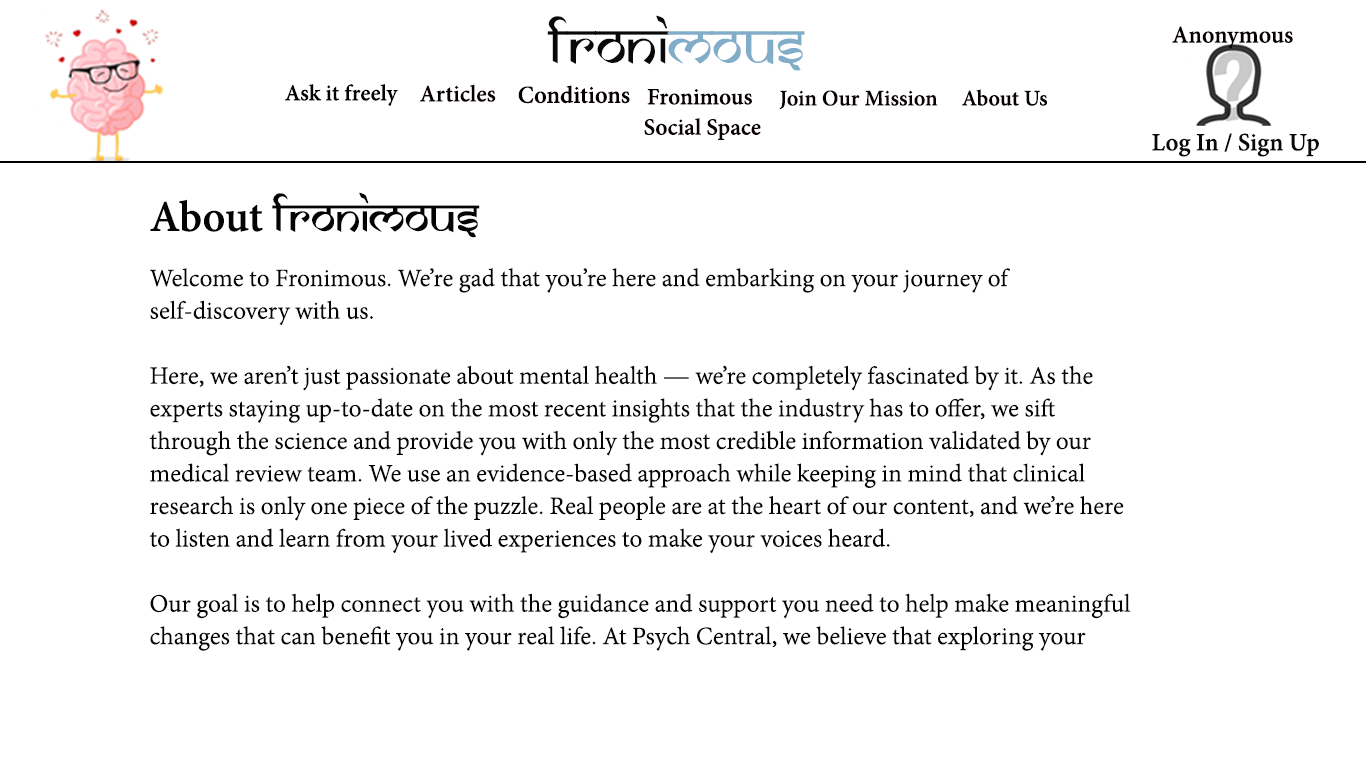
<style>
.page{position:relative;width:1366px;height:768px;background:#ffffff}
.page>*{position:absolute;margin:0}
.t1{font:59.7px "SamarkanNormal";color:#090909}
.t2{font:59.7px "SamarkanNormal";color:#82adc9}
.t3{font:26.2px "AdobeDevanagari-Bold";color:#080000}
.t4{font:24.8px "AdobeDevanagari-Bold";color:#020202}
.t5{font:25.8px "AdobeDevanagari-Bold";color:#080000}
.t6{font:26.5px "AdobeDevanagari-Bold";color:#080000}
.t7{font:25.3px "AdobeDevanagari-Bold";color:#080000}
.t8{font:24.2px "AdobeDevanagari-Bold";color:#080000}
.t9{font:24.3px "AdobeDevanagari-Bold";color:#080000}
.t10{font:27.2px "AdobeDevanagari-Bold";color:#090909}
.t11{font:48px "SamarkanNormal";color:#040404}
.t12{font:48px "AdobeDevanagari-Bold";color:#040404}
.t13{font:27.1px "AdobeDevanagari-Regular";color:#040404}
</style>
<div class="page">
<p class="t1" style="left:547px;top:15px;width:258px;height:56px">froni<span class="t2">mous</span></p>
<p class="t3" style="left:1172px;top:26px;width:121px;height:23px">Anonymous</p>
<p class="t4" style="left:285px;top:84px;width:113px;height:22px">Ask it freely</p>
<p class="t5" style="left:419px;top:84px;width:77px;height:18px">Articles</p>
<p class="t6" style="left:518px;top:85px;width:112px;height:19px">Conditions</p>
<p class="t7" style="left:644px;top:89px;width:117px;height:51px;text-align:center">Fronimous <br> Social Space</p>
<p class="t8" style="left:962px;top:89px;width:85px;height:17px">About Us</p>
<p class="t9" style="left:779px;top:90px;width:159px;height:20px">Join Our Mission</p>
<p class="t10" style="left:1152px;top:133px;width:167px;height:24px">Log In / Sign Up</p>
<p class="t11" style="left:150px;top:192px;width:330px;height:46px"><span class="t12">About </span>Fronimous</p>
<p class="t13" style="left:149px;top:268px;width:982px;height:383px">Welcome to Fronimous. We’re gad that you’re here and embarking on your journey of self-discovery with us. <br><br>Here, we aren’t just passionate about mental health — we’re completely fascinated by it. As the experts staying up-to-date on the most recent insights that the industry has to offer, we sift through the science and provide you with only the most credible information validated by our medical review team. We use an evidence-based approach while keeping in mind that clinical research is only one piece of the puzzle. Real people are at the heart of our content, and we’re here to listen and learn from your lived experiences to make your voices heard. <br><br>Our goal is to help connect you with the guidance and support you need to help make meaningful changes that can benefit you in your real life. At Psych Central, we believe that exploring your mental health is less about identifying what’s “wrong” and more about fortifying your strengths and deepening your understanding of yourself and your needs. <br><br>But we understand that this process is a marathon, not a sprint. Whether this is your first time exploring your mental health options or you’ve been on this path with us since the beginning, we want to meet you where you are and let you know you’re not alone. <br><br>We’re here for you, and we’re here with you because you are at the center of what we do.</p>
</div>
